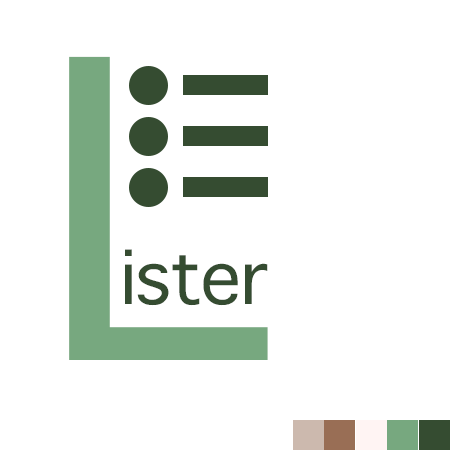
<style>
.page{position:relative;width:450px;height:450px;background:#ffffff}
.page>*{position:absolute;margin:0}
.t1{font:400px "Osaka";letter-spacing:-0.025em;color:#77a87f}
.t2{font:72px "Osaka";letter-spacing:-0.025em;color:#354c31}
</style>
<div class="page">
<p class="t1" style="left:69px;top:56px;width:199px;height:304px">L</p>
<p class="t2" style="left:125px;top:249px;width:143px;height:57px">ister</p>
</div>
